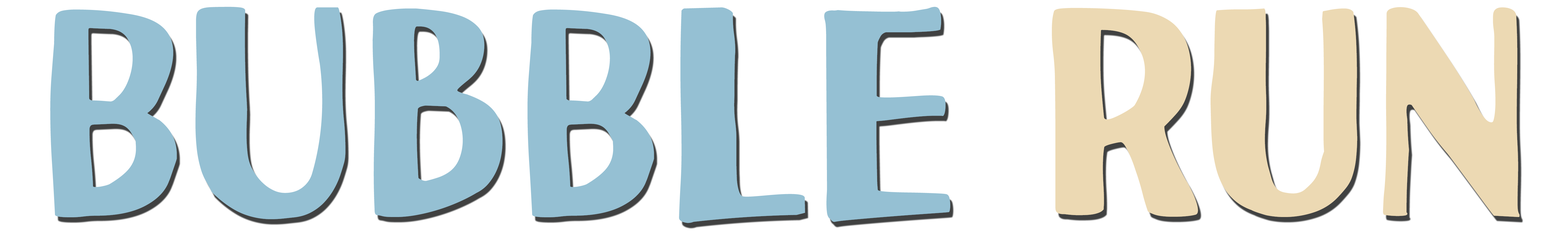
<style>
.page{position:relative;width:1568px;height:238px;background:#ffffff}
.page>*{position:absolute;margin:0}
.t1{font:267.2px "Uchiyama-Regular";color:#95c0d3;scale:1.03 1}
.t2{font:267.2px "Uchiyama-Regular";color:#ecd9b3;scale:1.03 1}
</style>
<div class="page">
<p class="t1" style="left:50px;top:7px;width:1470px;height:216px">BUBBLE <span class="t2">RUN</span></p>
</div>
